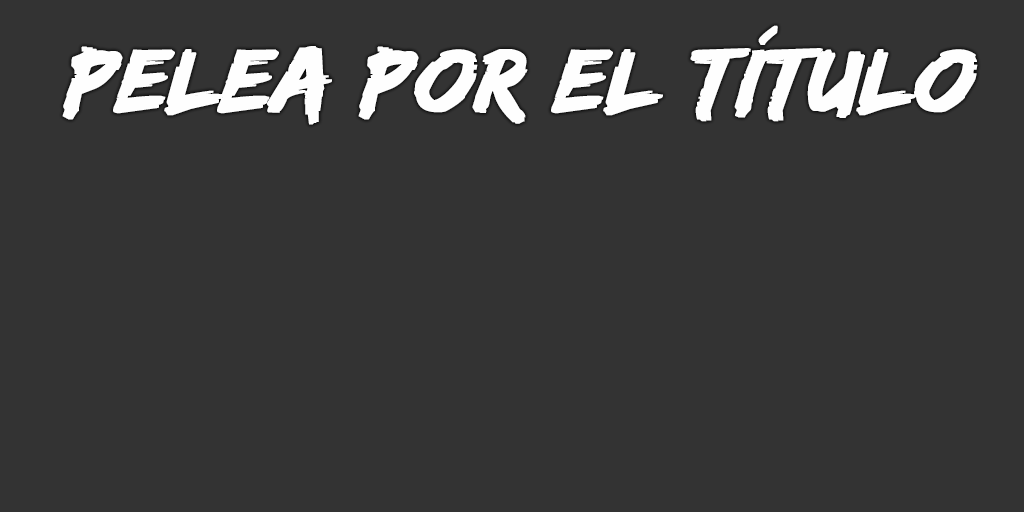
<style>
.page{position:relative;width:1024px;height:512px;background:#333333}
.page>*{position:absolute;margin:0}
.t1{font:93px "EdoSZ";color:#fefefe;font-weight:bold;font-style:italic;scale:1.04 1}
</style>
<div class="page">
<p class="t1" style="left:62px;top:25px;width:916px;height:100px">pelea por el título</p>
</div>
